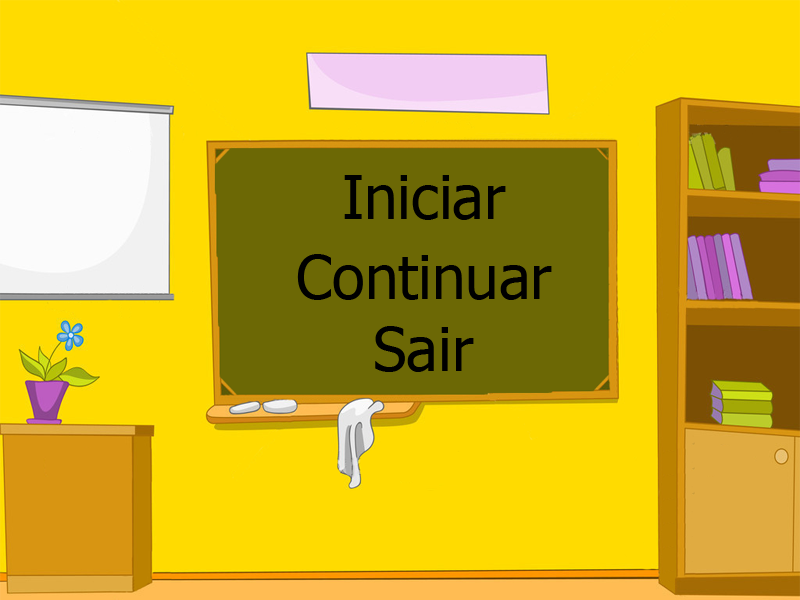
<style>
.page{position:relative;width:800px;height:600px;background:#ffdb00}
.page>*{position:absolute;margin:0}
.t1{font:60px "Tahoma";color:#000000}
</style>
<div class="page">
<p class="t1" style="left:344px;top:175px;width:162px;height:45px">Iniciar</p>
<p class="t1" style="left:297px;top:254px;width:255px;height:46px">Continuar</p>
<p class="t1" style="left:375px;top:326px;width:99px;height:46px">Sair</p>
</div>
